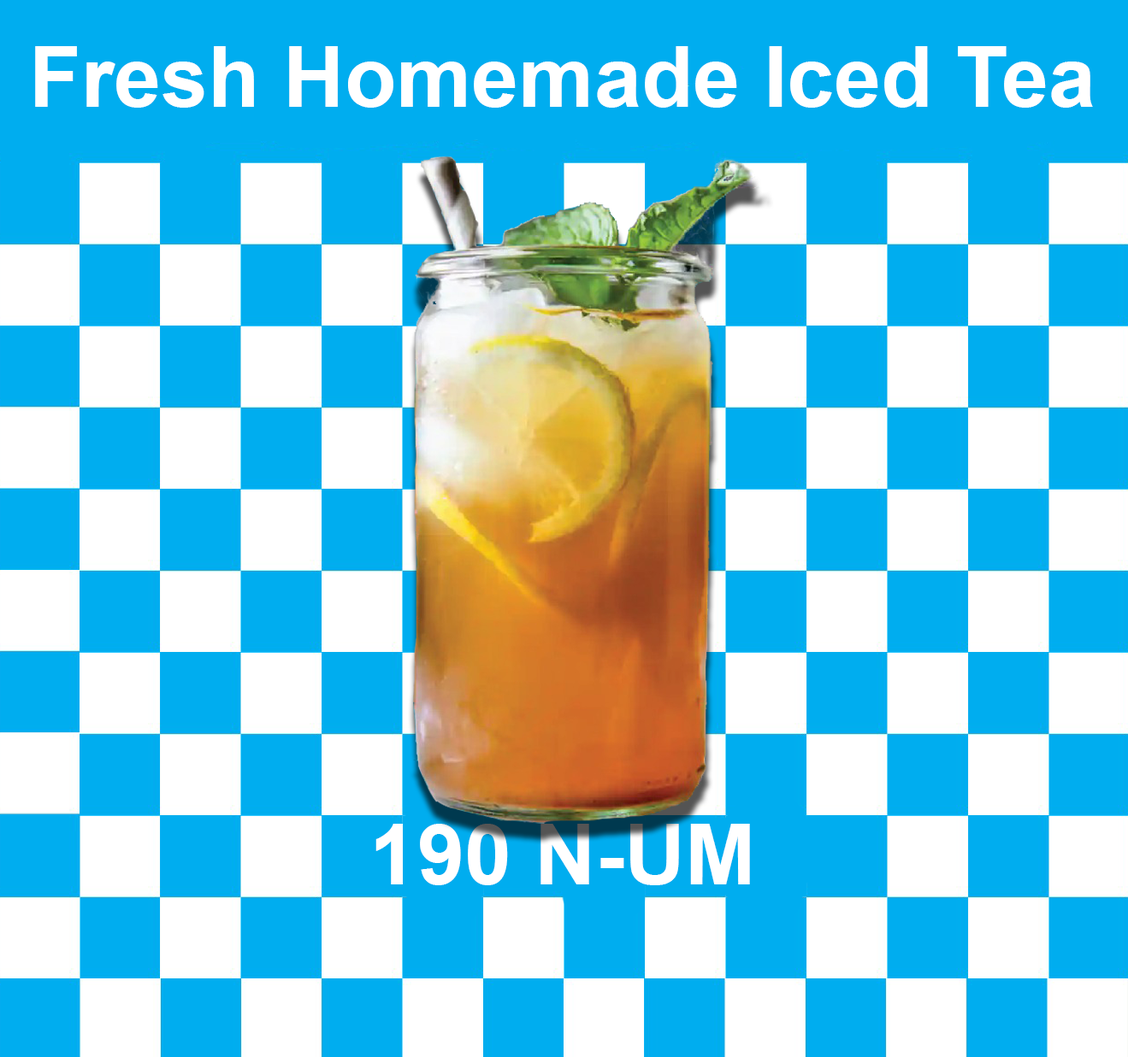
<style>
.page{position:relative;width:1128px;height:1057px;background:#00adef}
.page>*{position:absolute;margin:0}
.t1{font:84.6px "Arial-BoldMT";color:#ffffff}
</style>
<div class="page">
<p class="t1" style="left:35px;top:46px;width:1058px;height:62px">Fresh Homemade Iced Tea</p>
<p class="t1" style="left:375px;top:824px;width:375px;height:62px">190 N-UM</p>
</div>
